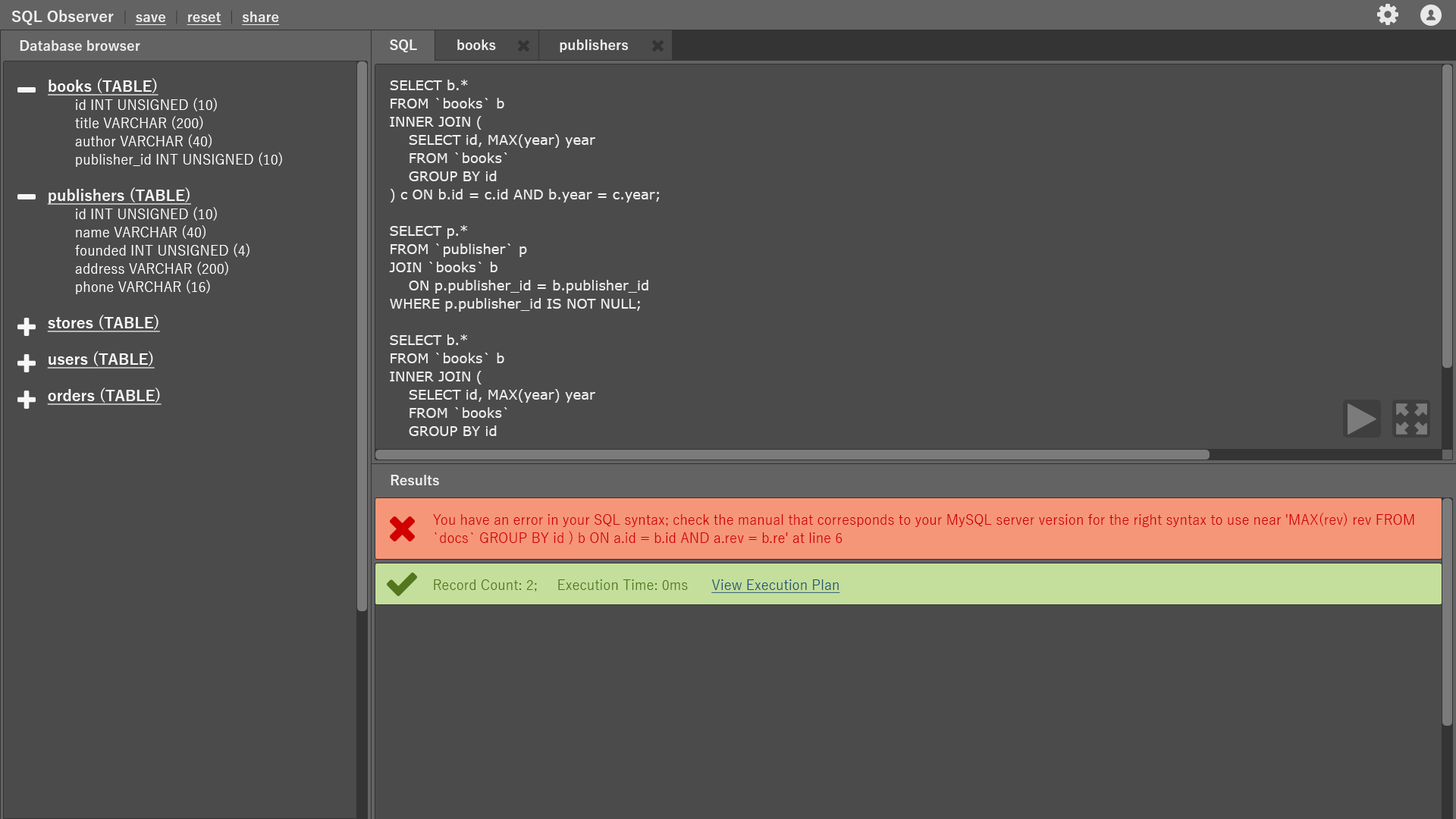
<style>
.page{position:relative;width:1456px;height:819px;background:#4b4b4b}
.page>*{position:absolute;margin:0}
.t1{font:15.2px "YuGothic-Bold";color:#efefef}
.t2{font:13.6px "YuGothic-Bold";color:#343434}
.t3{font:13.6px "YuGothic-Bold";color:#efefef;text-decoration:underline}
.t4{font:13.6px "YuGothic-Bold";color:#efefef}
.t5{font:13.6px/18.2px "YuGothic-Regular";color:#ffffff}
.t6{font:15.2px/18.2px "YuGothic-Bold";color:#ffffff;text-decoration:underline}
.t7{font:15.2px/18.2px "YuGothic-Bold";color:#f7f7f7;text-decoration:underline}
.t8{font:13.6px/18.2px "Verdana";color:#efefef}
.t9{font:13.6px/18.2px "YuGothic-Regular";color:#d00000}
.t10{font:13.6px "YuGothic-Regular";color:#53761f}
.t11{font:13.6px "YuGothic-Regular";color:#1f5476;text-decoration:underline}
</style>
<div class="page">
<p class="t1" style="left:11px;top:10px;width:269px;height:15px">SQL Observer  <span class="t2">|  </span><span class="t3">save  </span><span class="t2">|  </span><span class="t3">reset  </span><span class="t2">|  </span><span class="t3">share</span></p>
<p class="t4" style="left:20px;top:40px;width:120px;height:11px">Database browser</p>
<p class="t4" style="left:390px;top:39px;width:27px;height:13px">SQL</p>
<p class="t4" style="left:457px;top:39px;width:39px;height:11px">books</p>
<p class="t4" style="left:560px;top:39px;width:68px;height:13px">publishers</p>
<p class="t5" style="left:47px;top:78px;width:235px;height:327px"><span class="t6">books </span><span class="t7">(TABLE)<br></span> id INT UNSIGNED (10)<br> title VARCHAR (200)<br> author VARCHAR (40)<br> publisher_id INT UNSIGNED (10)<br><br><span class="t7">publishers (TABLE)<br></span> id INT UNSIGNED (10)<br> name VARCHAR (40)<br> founded INT UNSIGNED (4)<br> address VARCHAR (200)<br> phone VARCHAR (16)<br><br><span class="t6">stores </span><span class="t7">(TABLE)<br></span><span class="t6"><br>users </span><span class="t7">(TABLE)<br></span><span class="t6"><br>orders </span><span class="t7">(TABLE)</span></p>
<p class="t8" style="left:389px;top:80px;width:271px;height:356px">SELECT b.*<br>FROM `books` b<br>INNER JOIN (<br>    SELECT id, MAX(year) year<br>    FROM `books`<br>    GROUP BY id<br>) c ON b.id = c.id AND b.year = c.year;<br><br>SELECT p.*<br>FROM `publisher` p<br>JOIN `books` b<br>    ON p.publisher_id = b.publisher_id<br>WHERE p.publisher_id IS NOT NULL;<br><br>SELECT b.*<br>FROM `books` b<br>INNER JOIN (<br>    SELECT id, MAX(year) year<br>    FROM `books`<br>    GROUP BY id<br>) c ON b.id = c.id AND b.year = c.year;<br><br><br>SELECT p.*<br>FROM `publisher` p<br>JOIN `books` b<br>    ON p.publisher_id = b.publisher_id<br>WHERE p.publisher_id IS NOT NULL;</p>
<p class="t4" style="left:391px;top:475px;width:48px;height:10px">Results</p>
<p class="t9" style="left:433px;top:513px;width:981px;height:31px">You have an error in your SQL syntax; check the manual that corresponds to your MySQL server version for the right syntax to use near 'MAX(rev) rev FROM `docs` GROUP BY id ) b ON a.id = b.id AND a.rev = b.re' at line 6</p>
<p class="t10" style="left:434px;top:579px;width:406px;height:14px">Record Count: 2;     Execution Time: 0ms      <span class="t11">View Execution Plan</span></p>
</div>
